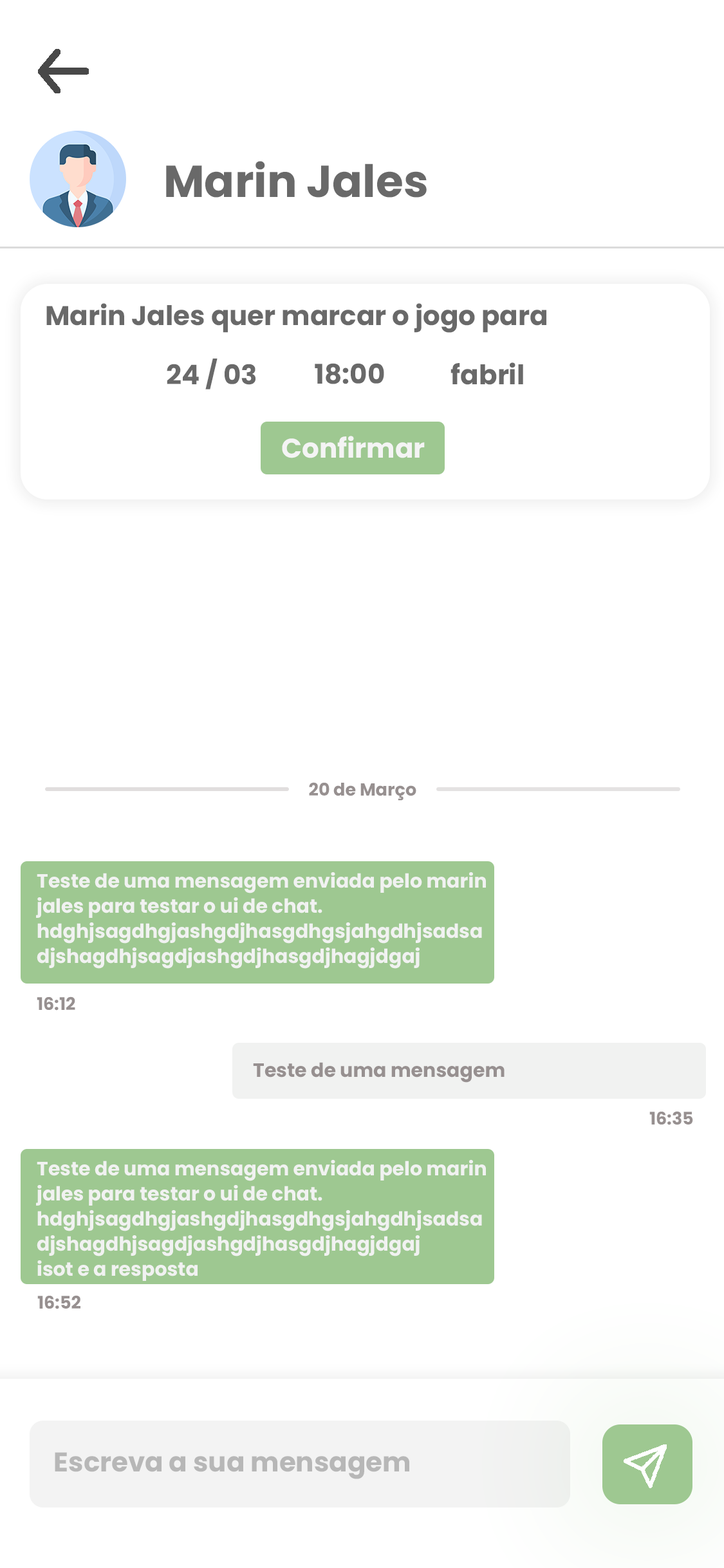
<style>
.page{position:relative;width:724px;height:1568px;background:#ffffff}
.page>*{position:absolute;margin:0}
.t1{font:44.6px "Poppins-Bold";color:#696969}
.t2{font:27px "Poppins-Bold";color:#696969}
.t3{font:27px "Poppins-Bold";color:#f4f4f4}
.t4{font:17.4px "Poppins-Bold";color:#979090}
.t5{font:19.3px/25.1px "Poppins-Bold";color:#f1f2f1}
.t6{font:19.3px "Poppins-Bold";color:#979090}
.t7{font:27px "Poppins-Bold";color:#b7b7b7}
</style>
<div class="page">
<p class="t1" style="left:166px;top:161px;width:261px;height:37px">Marin Jales</p>
<p class="t2" style="left:46px;top:303px;width:500px;height:30px">Marin Jales quer marcar o jogo para</p>
<p class="t2" style="left:167px;top:359px;width:89px;height:30px">24 / 03</p>
<p class="t2" style="left:315px;top:363px;width:69px;height:21px">18:00</p>
<p class="t2" style="left:451px;top:362px;width:72px;height:23px">fabril</p>
<p class="t3" style="left:282px;top:436px;width:143px;height:22px">Confirmar</p>
<p class="t4" style="left:309px;top:782px;width:107px;height:19px">20 de Março</p>
<p class="t5" style="left:36px;top:872px;width:450px;height:97px">Teste de uma mensagem enviada pelo marin<br>jales para testar o ui de chat.<br>hdghjsagdhgjashgdjhasgdhgsjahgdhjsadsa<br>djshagdhjsagdjashgdjhasgdjhagjdgaj</p>
<p class="t4" style="left:37px;top:996px;width:38px;height:15px">16:12</p>
<p class="t6" style="left:253px;top:1062px;width:252px;height:21px">Teste de uma mensagem</p>
<p class="t4" style="left:649px;top:1111px;width:44px;height:14px">16:35</p>
<p class="t5" style="left:36px;top:1160px;width:450px;height:121px">Teste de uma mensagem enviada pelo marin<br>jales para testar o ui de chat.<br>hdghjsagdhgjashgdjhasgdhgsjahgdhjsadsa<br>djshagdhjsagdjashgdjhasgdjhagjdgaj<br>isot e a resposta</p>
<p class="t4" style="left:37px;top:1295px;width:43px;height:14px">16:52</p>
<p class="t7" style="left:55px;top:1452px;width:354px;height:27px">Escreva a sua mensagem</p>
</div>
